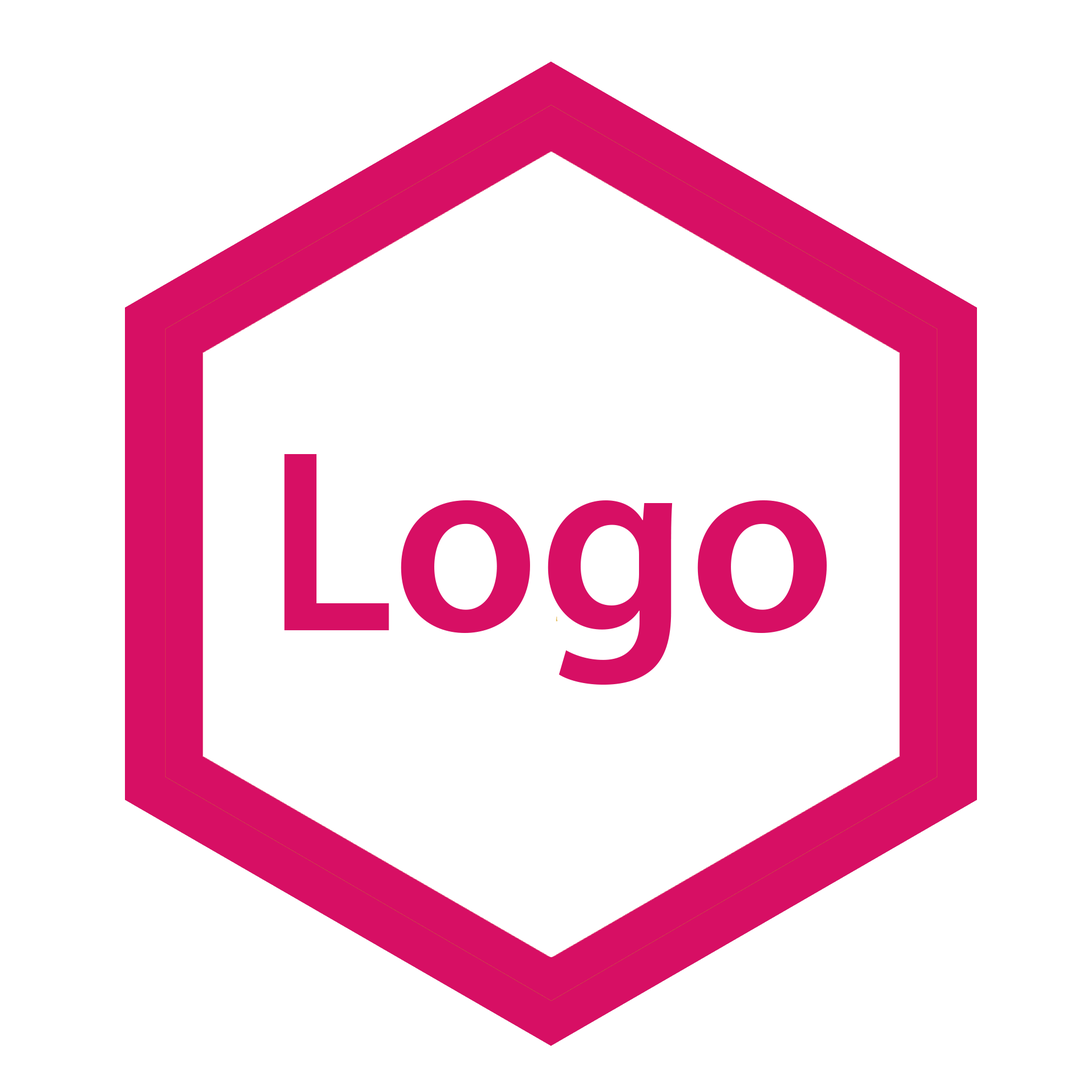
<style>
.page{position:relative;width:1092px;height:1092px;background:#ffffff}
.page>*{position:absolute;margin:0}
.t1{font:261.3px "MyriadPro-Semibold";color:#d70f64}
</style>
<div class="page">
<p class="t1" style="left:284px;top:454px;width:543px;height:231px">Logo</p>
</div>
